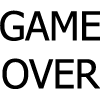
<style>
.page{position:relative;width:100px;height:100px;background:#ffffff}
.page>*{position:absolute;margin:0}
.t1{font:40px "Tahoma";letter-spacing:-0.01em;color:#000000}
</style>
<div class="page">
<p class="t1" style="left:0px;top:10px;width:101px;height:79px;text-align:center">GAME<br>OVER</p>
</div>
